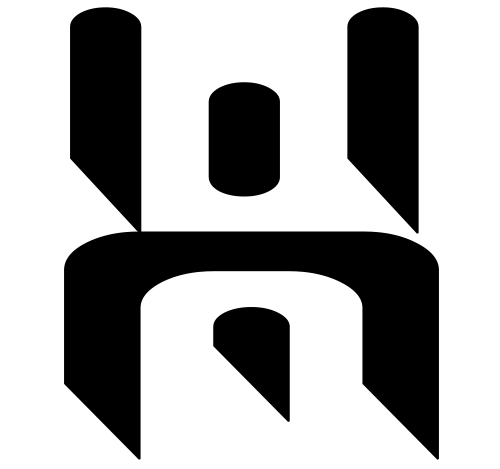
<style>
.page{position:relative;width:500px;height:469px;background:#ffffff}
.page>*{position:absolute;margin:0}
.t1{font:299.6px "Waning-Moon";color:#000000;font-weight:bold;scale:1.85 1}
.t2{font:302.1px "Waning-Moon";color:#000000;font-weight:bold;scale:1.98 1}
</style>
<div class="page">
<p class="t1" style="left:70px;top:7px;width:349px;height:227px">W</p>
<p class="t2" style="left:64px;top:231px;width:375px;height:229px">M</p>
</div>
